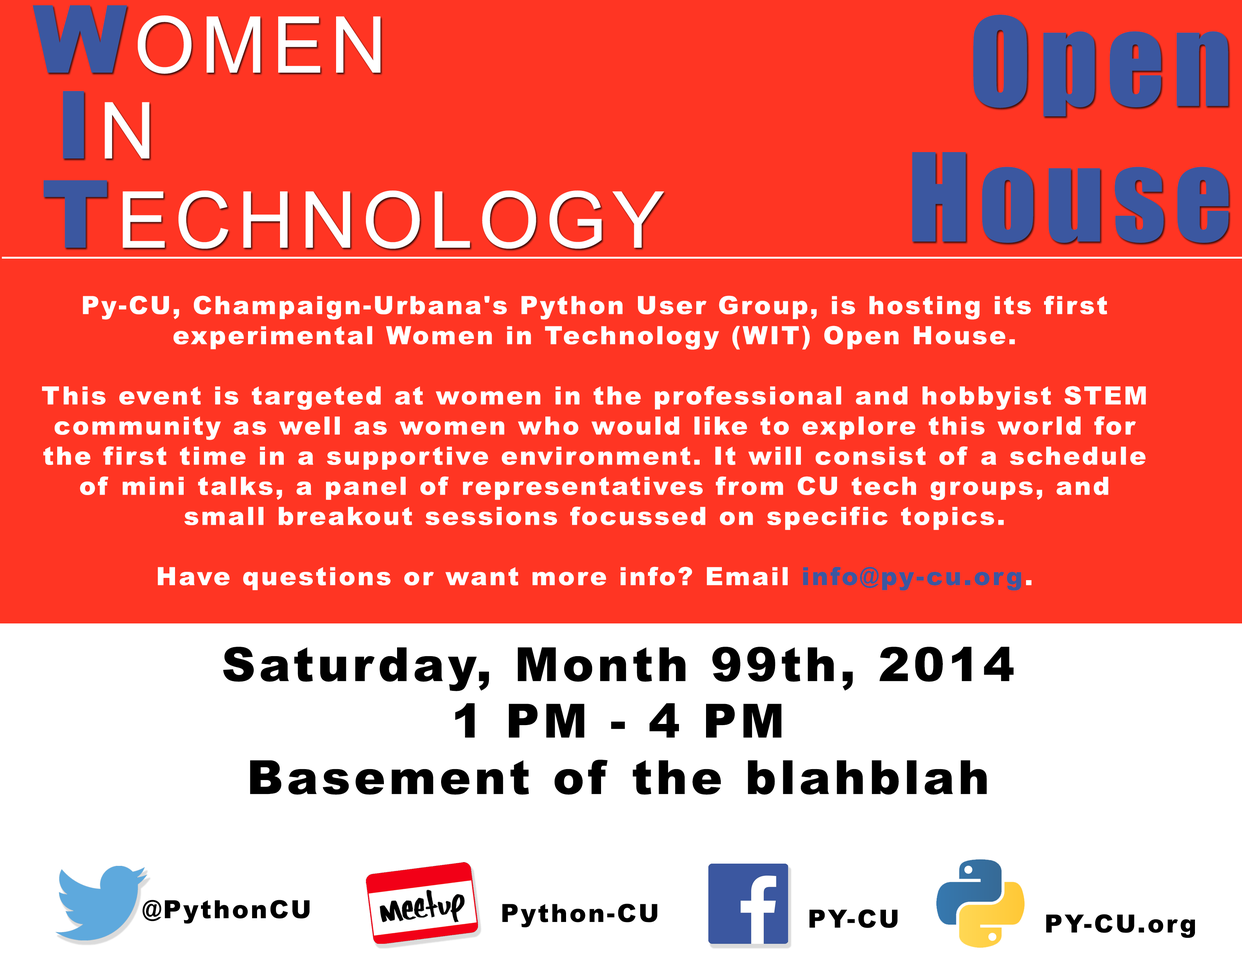
<style>
.page{position:relative;width:1242px;height:960px;background:#ff3523}
.page>*{position:absolute;margin:0}
.t1{font:78.4px "ArialMT";letter-spacing:0.075em;color:#ffffff}
.t2{font:94.1px "Arial-Black";letter-spacing:0.075em;color:#3b57a0}
.t3{font:112.9px "Impact";letter-spacing:0.075em;color:#3b57a0}
.t4{font:25.1px "Arial-Black";letter-spacing:0.075em;color:#ffffff}
.t5{font:25.1px "Arial-Black";letter-spacing:0.075em;color:#3b57a0}
.t6{font:47.1px "Arial-Black";letter-spacing:0.075em;color:#000000}
.t7{font:25.1px "Arial-Black";letter-spacing:0.075em;color:#000000}
</style>
<div class="page">
<p class="t1" style="left:33px;top:5px;width:348px;height:69px"><span class="t2">W</span>OMEN</p>
<p class="t3" style="left:912px;top:15px;width:317px;height:228px;text-align:right">Open<br> House</p>
<p class="t2" style="left:63px;top:91px;width:86px;height:67px">I<span class="t1">N</span></p>
<p class="t1" style="left:43px;top:180px;width:621px;height:69px"><span class="t2">T</span>ECHNOLOGY</p>
<p class="t4" style="left:42px;top:296px;width:1104px;height:295px;text-align:center">Py-CU, Champaign-Urbana's Python User Group, is hosting its first <br>experimental Women in Technology (WIT) Open House.<br><br>This event is targeted at women in the professional and hobbyist STEM community as well as women who would like to explore this world for the first time in a supportive environment. It will consist of a schedule of mini talks, a panel of representatives from CU tech groups, and small breakout sessions focussed on specific topics.<br><br>Have questions or want more info? Email <span class="t5">info@py-cu.org</span>.</p>
<p class="t6" style="left:223px;top:647px;width:791px;height:148px;text-align:center">Saturday, Month 99th, 2014<br>1 PM - 4 PM<br>Basement of the blahblah</p>
<p class="t7" style="left:142px;top:900px;width:168px;height:24px">@PythonCU</p>
<p class="t7" style="left:502px;top:903px;width:156px;height:25px">Python-CU</p>
<p class="t7" style="left:809px;top:909px;width:89px;height:19px">PY-CU</p>
<p class="t7" style="left:1046px;top:914px;width:149px;height:24px">PY-CU.org</p>
</div>
